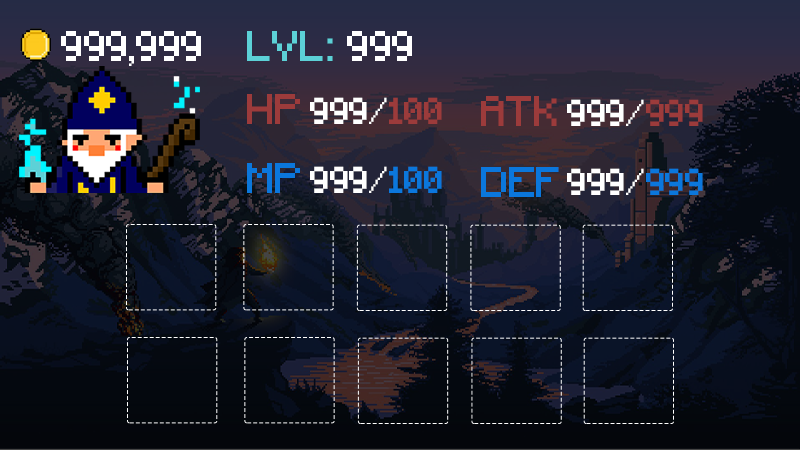
<style>
.page{position:relative;width:800px;height:450px}
.page>*{position:absolute;margin:0}
.t1{font:40px "Minecraft";color:#ffffff}
.t2{font:40px "Minecraft";color:#5cd1d7}
.t3{font:40px "Minecraft";color:#9c3b3b}
.t4{font:35px "Minecraft";color:#ffffff}
.t5{font:35px "Minecraft";color:#9c3b3b}
.t6{font:40px "Minecraft";color:#0b77dc}
.t7{font:35px "Minecraft";color:#0b77dc}
</style>
<div class="page">
<p class="t1" style="left:61px;top:31px;width:140px;height:35px">999,999</p>
<p class="t2" style="left:247px;top:31px;width:165px;height:30px">LVL: <span class="t1">999</span></p>
<p class="t3" style="left:247px;top:94px;width:53px;height:30px">HP</p>
<p class="t4" style="left:310px;top:97px;width:132px;height:27px">999/<span class="t5">100</span></p>
<p class="t3" style="left:481px;top:96px;width:76px;height:30px">ATK</p>
<p class="t4" style="left:567px;top:99px;width:136px;height:27px">999/<span class="t5">999</span></p>
<p class="t6" style="left:247px;top:163px;width:53px;height:30px">MP</p>
<p class="t4" style="left:310px;top:166px;width:132px;height:27px">999/<span class="t7">100</span></p>
<p class="t6" style="left:481px;top:167px;width:78px;height:30px">DEF</p>
<p class="t4" style="left:567px;top:168px;width:136px;height:27px">999/<span class="t7">999</span></p>
</div>
